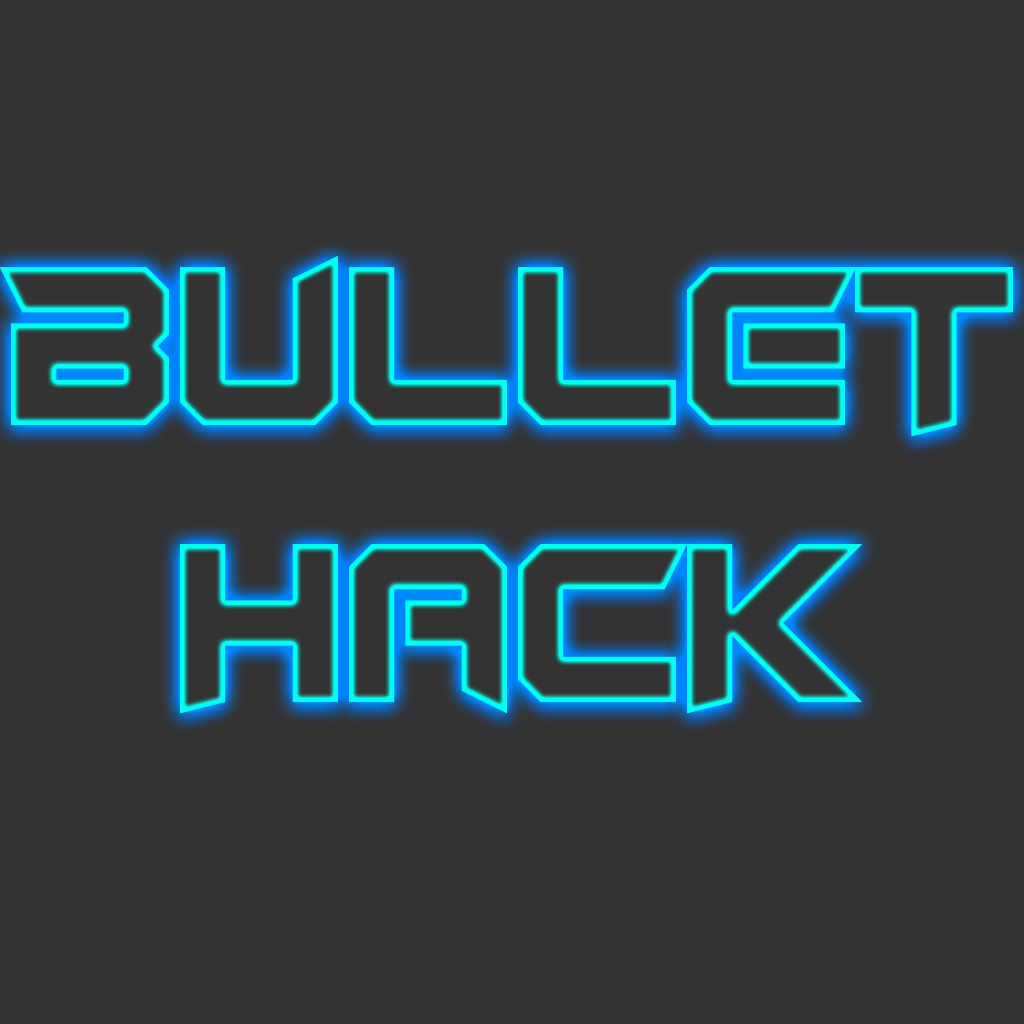
<style>
.page{position:relative;width:1024px;height:1024px;background:#333333}
.page>*{position:absolute;margin:0}
.t1{font:230.5px "RocketRinder"}
</style>
<div class="page">
<p class="t1" style="left:0px;top:255px;width:1013px;height:459px;text-align:center">Bullet<br>Hack</p>
</div>
